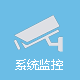
<style>
.page{position:relative;width:80px;height:80px;background:#6bbde6}
.page>*{position:absolute;margin:0}
.t1{font:12px "MicrosoftYaHei";color:#ffffff}
</style>
<div class="page">
<p class="t1" style="left:15px;top:59px;width:48px;height:11px">系统监控</p>
</div>
